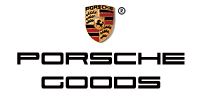
<style>
.page{position:relative;width:200px;height:96px;background:#ffffff}
.page>*{position:absolute;margin:0}
.t1{font:24px/24px "911Porscha";color:#040000;font-weight:bold}
</style>
<div class="page">
<p class="t1" style="left:17px;top:52px;width:168px;height:37px;text-align:center">PORSCHE<br>goods</p>
</div>
